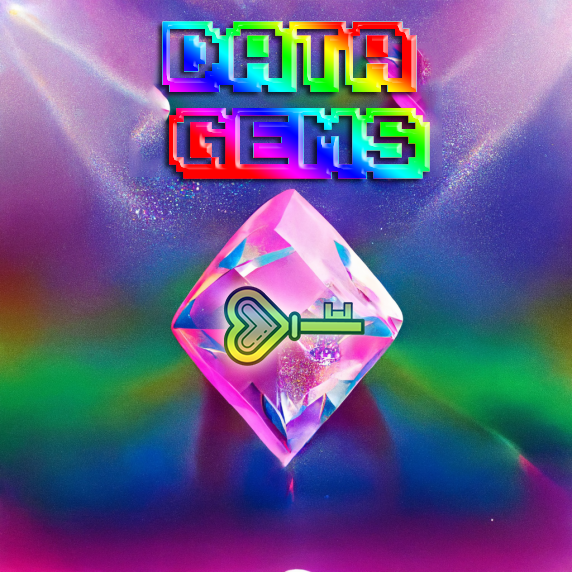
<style>
.page{position:relative;width:572px;height:572px}
.page>*{position:absolute;margin:0}
.t1{font:72px "KarmaticArcade"}
</style>
<div class="page">
<p class="t1" style="left:162px;top:21px;width:268px;height:158px;text-align:center">DATA<br> GEMS</p>
</div>
